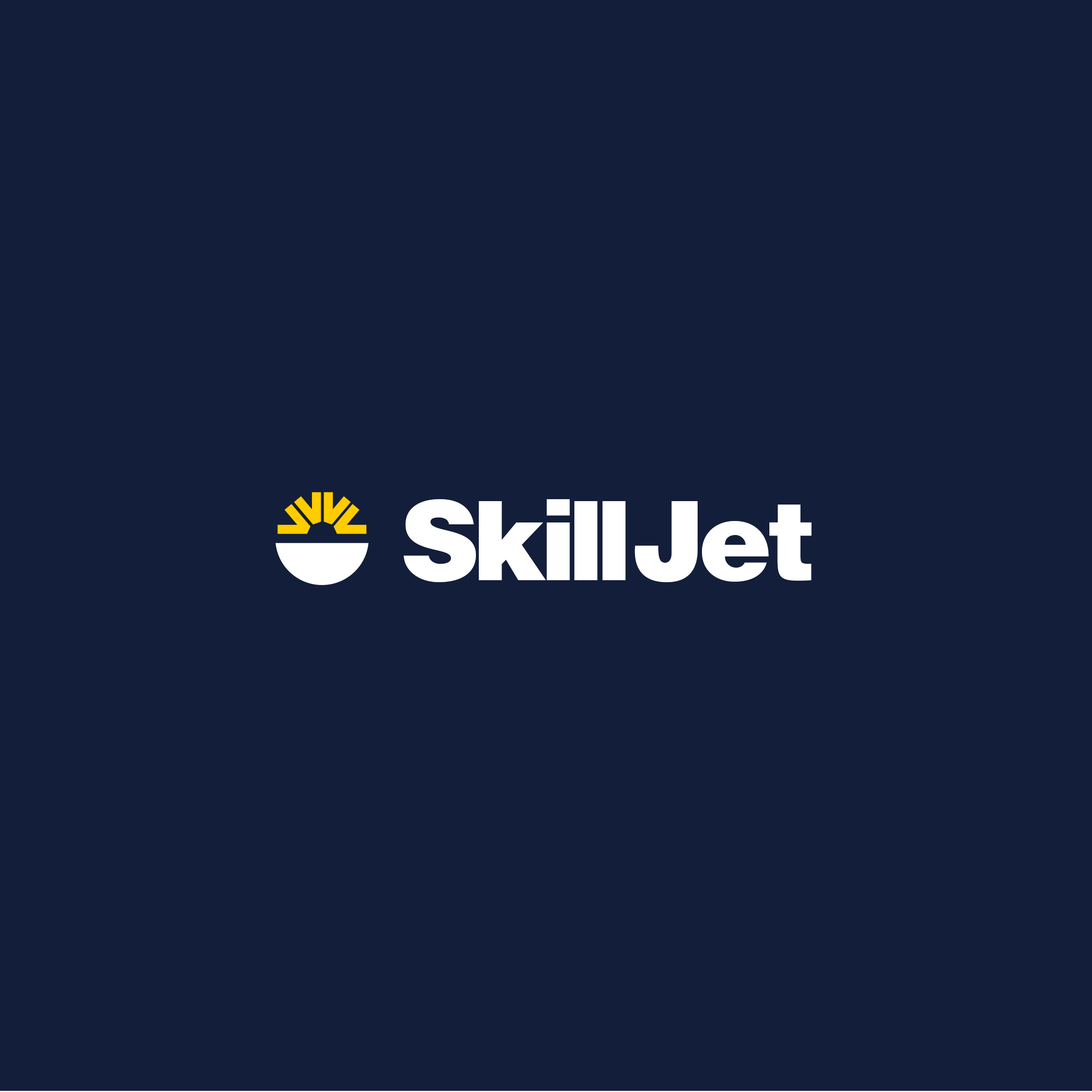
<style>
.page{position:relative;width:1092px;height:1092px;background:#131e3a}
.page>*{position:absolute;margin:0}
.t1{font:109.9px "Helvetica-Black";color:#ffffff}
</style>
<div class="page">
<p class="t1" style="left:404px;top:499px;width:408px;height:84px">SkillJet</p>
</div>
